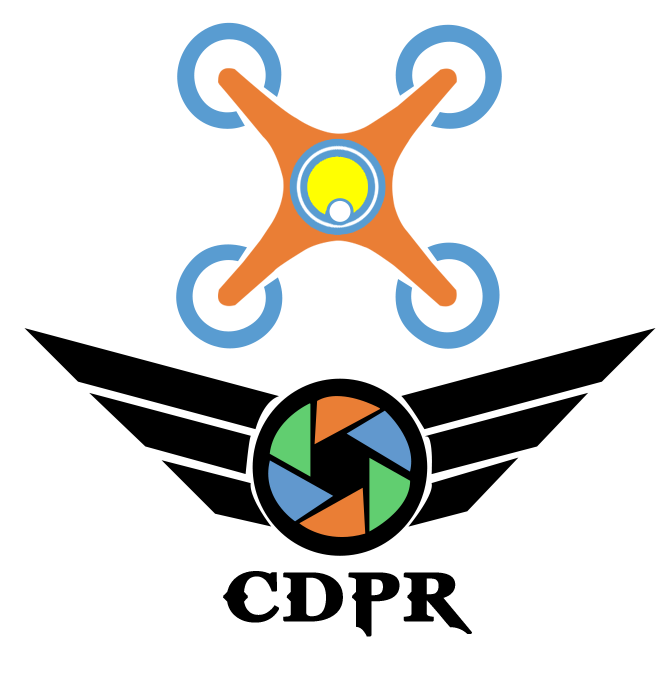
<style>
.page{position:relative;width:672px;height:678px;background:#ffffff}
.page>*{position:absolute;margin:0}
.t1{font:75px "GodOfWar";letter-spacing:0.01em;color:#000000;text-transform:uppercase;font-weight:bold}
</style>
<div class="page">
<p class="t1" style="left:223px;top:571px;width:249px;height:66px">CDPR</p>
</div>
